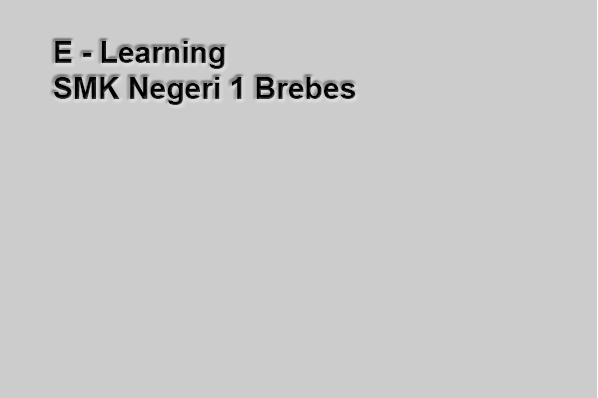
<style>
.page{position:relative;width:598px;height:398px;background:#cccccc}
.page>*{position:absolute;margin:0}
.t1{font:30px "Arial-BoldMT";color:#000000}
</style>
<div class="page">
<p class="t1" style="left:54px;top:41px;width:302px;height:64px;text-align:right">E - Learning<br>SMK Negeri 1 Brebes</p>
</div>
